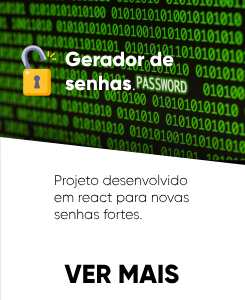
<style>
.page{position:relative;width:245px;height:300px;background:#ffffff}
.page>*{position:absolute;margin:0}
.t1{font:20.3px "Gilroy-ExtraBold";color:#ffffff}
.t2{font:20.3px "Gilroy-Light";color:#ffffff}
.t3{font:14px "Gilroy-Light";color:#0d0d0d}
.t4{font:26px "Gilroy-ExtraBold";color:#000000}
</style>
<div class="page">
<p class="t1" style="left:65px;top:51px;width:109px;height:40px">Gerador de <br>senhas<span class="t2">.</span></p>
<p class="t3" style="left:54px;top:174px;width:135px;height:46px">Projeto desenvolvido<br>em react para novas<br>senhas fortes.</p>
<p class="t4" style="left:64px;top:264px;width:115px;height:20px">VER MAIS</p>
</div>
